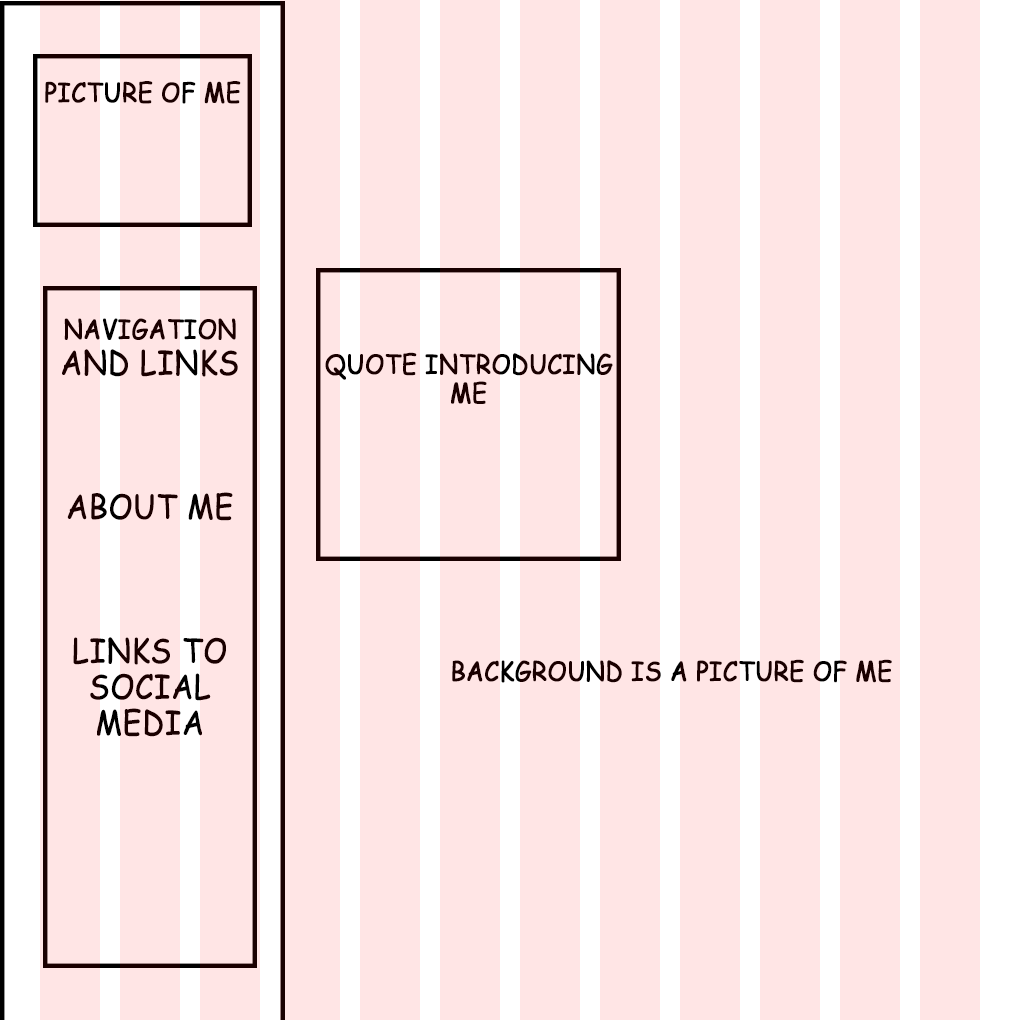
<style>
.page{position:relative;width:1020px;height:1020px;background:#ffe5e5}
.page>*{position:absolute;margin:0}
.t1{font:26.4px "ComicSansMS";color:#1a0000;text-transform:uppercase;font-weight:bold;scale:0.91 1}
.t2{font:33px "ComicSansMS";color:#1a0000;text-transform:uppercase;font-weight:bold;scale:0.91 1}
</style>
<div class="page">
<p class="t1" style="left:45px;top:81px;width:196px;height:23px">picture of me</p>
<p class="t2" style="left:62px;top:318px;width:176px;height:419px;text-align:center"><span class="t1">Navigation<br></span>and links <br><br><br><br>about me<br><br><br><br>links to <br>social media</p>
<p class="t1" style="left:325px;top:352px;width:288px;height:52px;text-align:center">Quote introducing <br>me</p>
<p class="t1" style="left:452px;top:659px;width:440px;height:24px">background is a picture of me</p>
</div>
